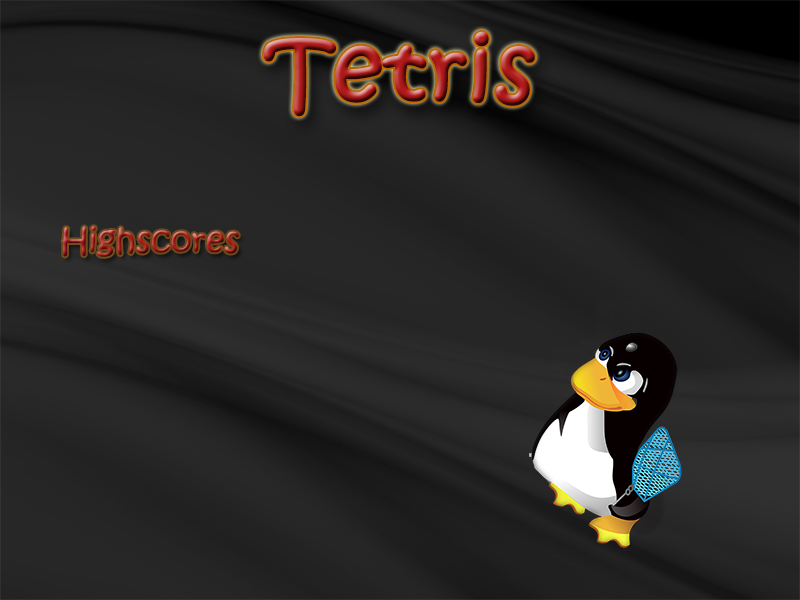
<style>
.page{position:relative;width:800px;height:600px}
.page>*{position:absolute;margin:0}
.t1{font:87px "KristenITC-Regular";font-weight:bold}
.t2{font:33px "KristenITC-Regular"}
</style>
<div class="page">
<p class="t1" style="left:264px;top:31px;width:271px;height:86px">Tetris</p>
<p class="t2" style="left:62px;top:226px;width:177px;height:31px">Highscores</p>
</div>
